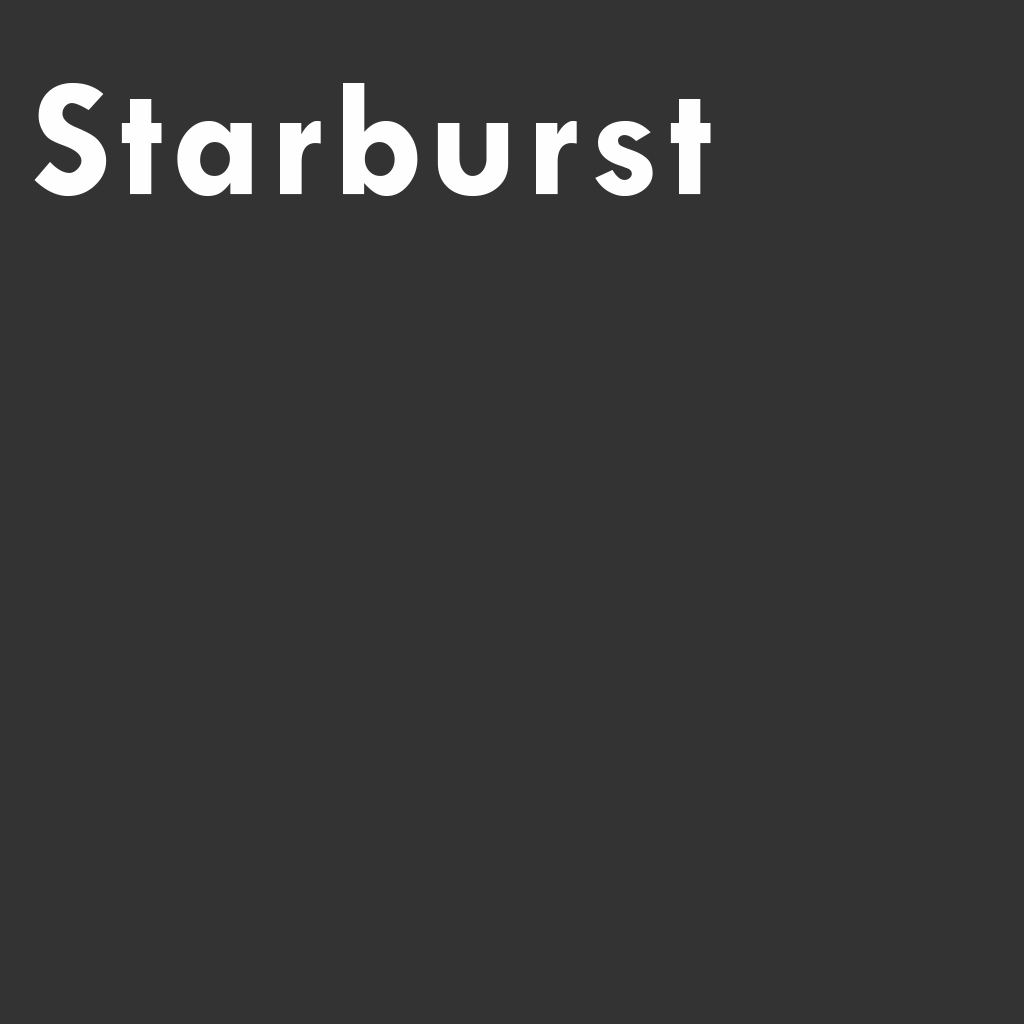
<style>
.page{position:relative;width:1024px;height:1024px;background:#333333}
.page>*{position:absolute;margin:0}
.t1{font:170px "TwCenMT-Bold";letter-spacing:0.05em;color:#fffefe}
</style>
<div class="page">
<p class="t1" style="left:34px;top:83px;width:677px;height:113px">Starburst</p>
</div>
